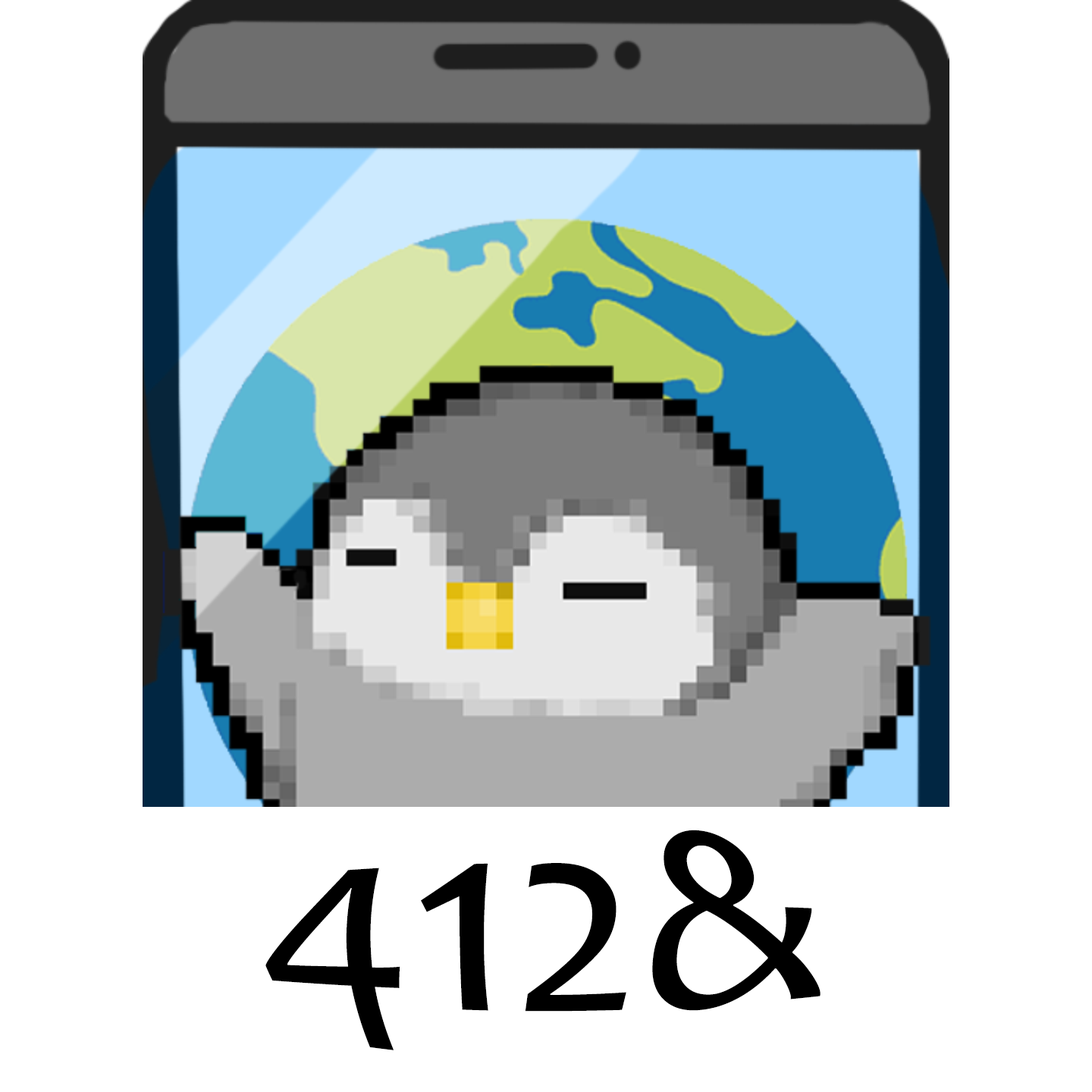
<style>
.page{position:relative;width:1092px;height:1092px;background:#ffffff}
.page>*{position:absolute;margin:0}
.t1{font:230.3px "Candara";color:#000000}
</style>
<div class="page">
<p class="t1" style="left:265px;top:830px;width:556px;height:220px">412&amp;</p>
</div>
